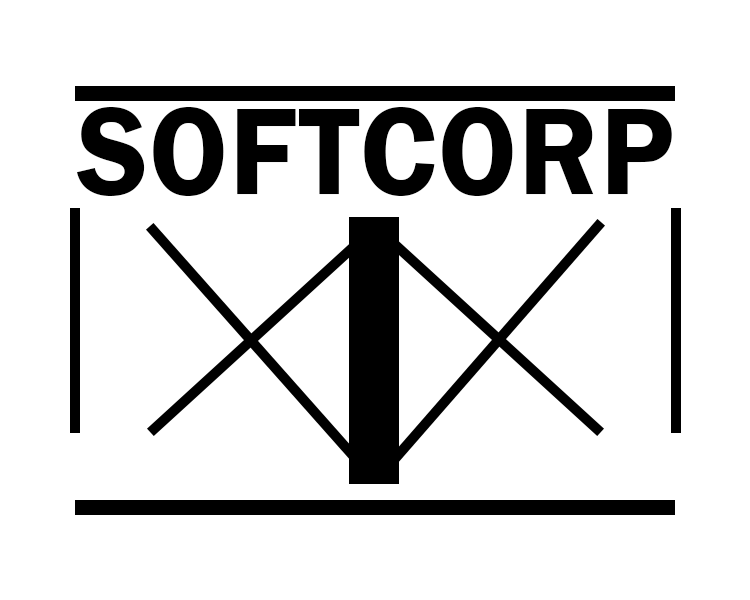
<style>
.page{position:relative;width:750px;height:600px;background:#ffffff}
.page>*{position:absolute;margin:0}
.t1{font:128.1px "FranklinGothic-Demi";letter-spacing:0.01em;color:#000000;scale:0.96 1}
</style>
<div class="page">
<p class="t1" style="left:76px;top:107px;width:596px;height:89px">SOFTCORP</p>
</div>
